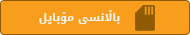
<style>
.page{position:relative;width:190px;height:35px;background:#f99d1c}
.page>*{position:absolute;margin:0}
.t1{font:11px "DroidArabicKufi-Bold";color:#f1f2f2}
</style>
<div class="page">
<p class="t1" style="left:39px;top:10px;width:81px;height:14px">باڵانسی مۆبایل</p>
</div>
